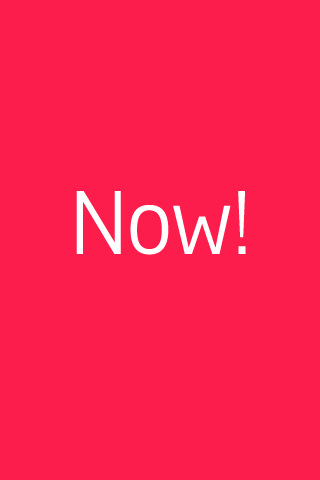
<style>
.page{position:relative;width:320px;height:480px;background:#fc1d4c}
.page>*{position:absolute;margin:0}
.t1{font:100px "Anaheim-Regular";letter-spacing:-0.005em;color:#ffffff}
</style>
<div class="page">
<p class="t1" style="left:76px;top:191px;width:170px;height:64px">Now!</p>
</div>
